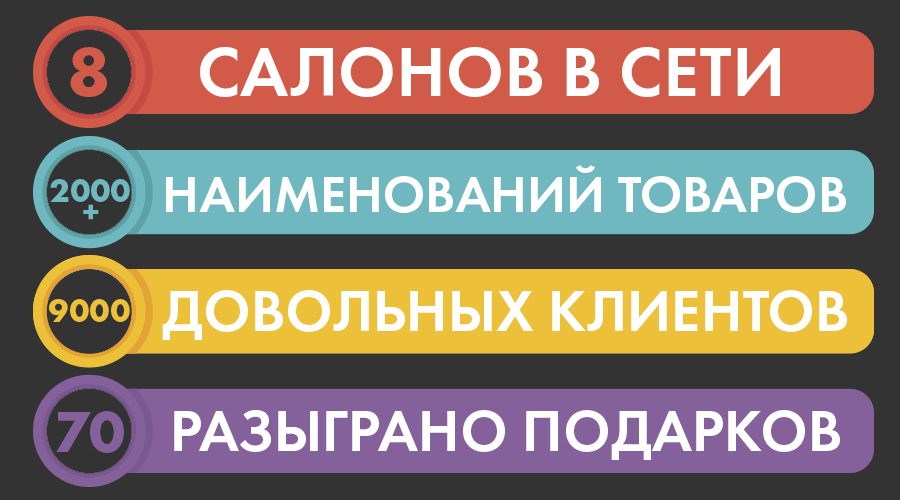
<style>
.page{position:relative;width:900px;height:500px;background:#333333}
.page>*{position:absolute;margin:0}
.t1{font:72px "FuturaPT-Bold";color:#d25a49;text-transform:uppercase}
.t2{font:72px "FuturaPT-Demi";color:#ffffff;text-transform:uppercase}
.t3{font:53px "FuturaPT-Demi";color:#ffffff;text-transform:uppercase}
.t4{font:34px/3.6px "FuturaPT-Bold";color:#70b8c0;text-transform:uppercase}
.t5{font:60px "FuturaPT-Demi";color:#ffffff;text-transform:uppercase}
.t6{font:34px "FuturaPT-Bold";color:#edc03a;text-transform:uppercase}
.t7{font:60px "FuturaPT-Bold";color:#84619b;text-transform:uppercase}
</style>
<div class="page">
<p class="t1" style="left:70px;top:47px;width:37px;height:50px">8</p>
<p class="t2" style="left:200px;top:47px;width:580px;height:50px">салонов в сети</p>
<p class="t3" style="left:166px;top:165px;width:680px;height:48px">наименований товаров</p>
<p class="t4" style="left:50px;top:179px;width:80px;height:41px;text-align:center">2000<br><br><br><br><br><br>+</p>
<p class="t5" style="left:162px;top:290px;width:685px;height:50px">довольных клиентов</p>
<p class="t6" style="left:49px;top:299px;width:81px;height:23px">9000</p>
<p class="t7" style="left:56px;top:411px;width:68px;height:42px">70</p>
<p class="t5" style="left:174px;top:410px;width:666px;height:50px">разыграно подарков</p>
</div>
